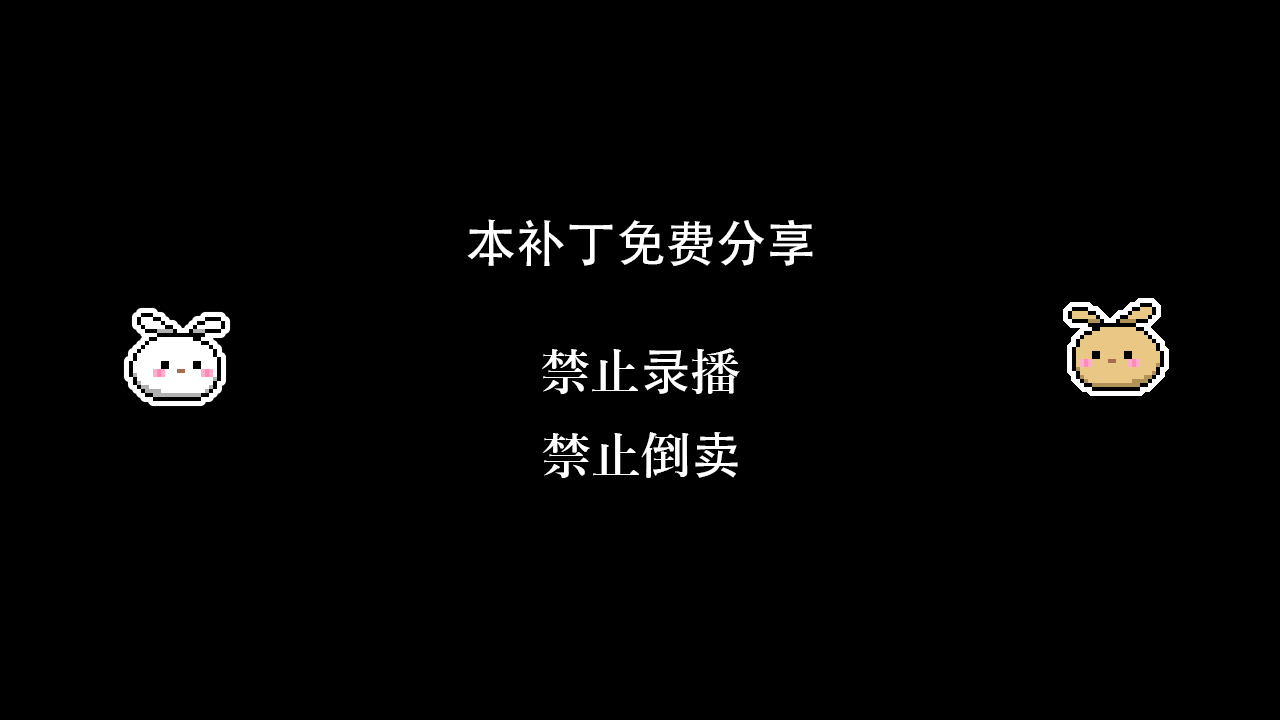
<style>
.page{position:relative;width:1280px;height:720px;background:#000000}
.page>*{position:absolute;margin:0}
.t1{font:50px "AdobeHeitiStd-Regular";color:#ffffff}
.t2{font:50px "YuMincho-Demibold";color:#ffffff}
</style>
<div class="page">
<p class="t1" style="left:467px;top:219px;width:346px;height:47px">本补丁免费分享</p>
<p class="t2" style="left:542px;top:348px;width:198px;height:46px">禁止<span class="t1">录</span>播</p>
<p class="t2" style="left:543px;top:432px;width:195px;height:46px">禁止倒<span class="t1">卖</span></p>
</div>
